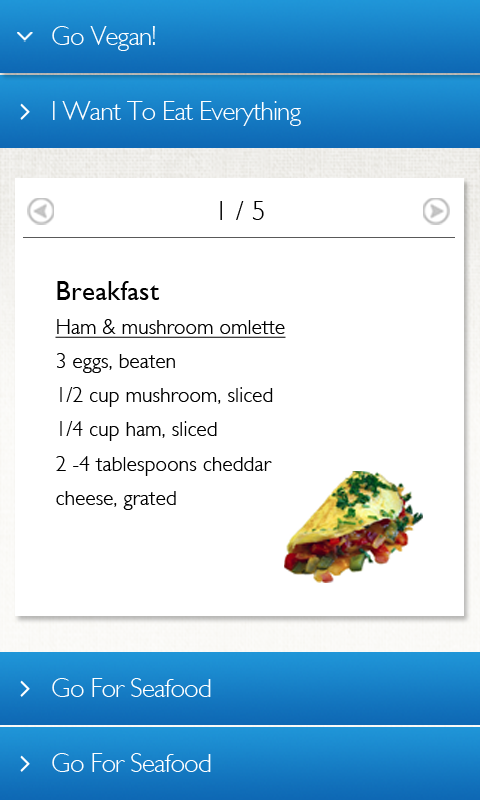
<style>
.page{position:relative;width:480px;height:800px;background:#ffffff}
.page>*{position:absolute;margin:0}
.t1{font:27px "GillSans-Light";letter-spacing:-0.03em;color:#ffffff}
.t2{font:27px "GillSans-Light";letter-spacing:0.01em;color:#000000}
.t3{font:21px/34.2px "GillSans-Light";letter-spacing:0.01em;color:#000000}
.t4{font:27px/34.2px "GillSans";letter-spacing:0.01em;color:#000000}
.t5{font:21px/34.2px "GillSans-Light";letter-spacing:0.01em;color:#000000;text-decoration:underline}
</style>
<div class="page">
<p class="t1" style="left:52px;top:26px;width:103px;height:25px">Go Vegan!</p>
<p class="t1" style="left:53px;top:101px;width:248px;height:25px">I Want To Eat Everything</p>
<p class="t2" style="left:220px;top:201px;width:44px;height:19px">1 / 5</p>
<p class="t3" style="left:55px;top:281px;width:231px;height:229px"><span class="t4">Breakfast<br></span><span class="t5">Ham &amp; mushroom omlette<br></span>3 eggs, beaten<br>1/2 cup mushroom, sliced<br>1/4 cup ham, sliced<br>2 -4 tablespoons cheddar<br>cheese, grated</p>
<p class="t1" style="left:52px;top:678px;width:159px;height:19px">Go For Seafood</p>
<p class="t1" style="left:52px;top:753px;width:159px;height:19px">Go For Seafood</p>
</div>
